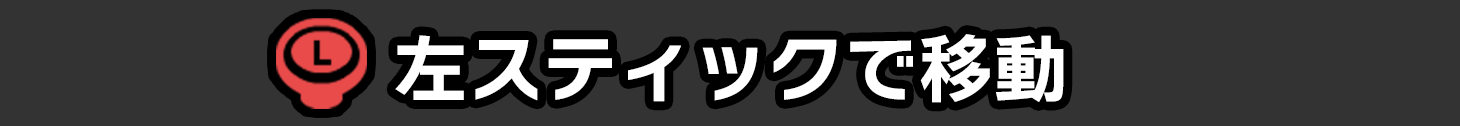
<style>
.page{position:relative;width:1460px;height:126px;background:#333333}
.page>*{position:absolute;margin:0}
.t1{font:75px "NitalagoRuika-06";color:#ffffff}
</style>
<div class="page">
<p class="t1" style="left:395px;top:34px;width:669px;height:69px">左スティックで移動</p>
</div>
